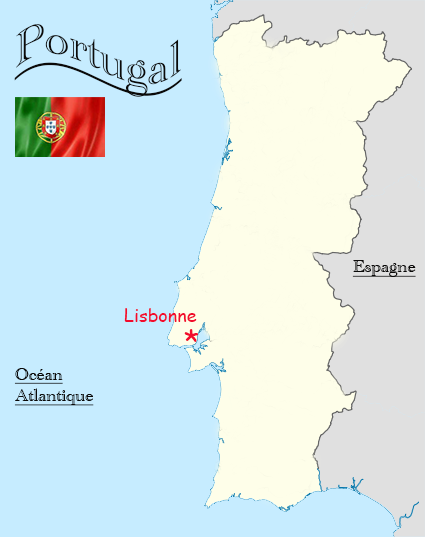
<style>
.page{position:relative;width:425px;height:537px;background:#c6ecff}
.page>*{position:absolute;margin:0}
.t1{font:48px "AcademyEngravedLetPlain";color:#0a0908;text-decoration:underline}
.t2{font:18px "AcademyEngravedLetPlain";color:#0a0908;text-decoration:underline}
.t3{font:18px "ComicSansMS";color:#f20c2d}
.t4{font:30px "ComicSansMS";color:#f20c2d}
</style>
<div class="page">
<p class="t1" style="left:14px;top:24px;width:168px;height:73px">Portugal</p>
<p class="t2" style="left:352px;top:260px;width:64px;height:17px">Espagne</p>
<p class="t3" style="left:124px;top:308px;width:73px;height:14px">Lisbonne</p>
<p class="t4" style="left:184px;top:329px;width:15px;height:13px">*</p>
<p class="t2" style="left:14px;top:368px;width:80px;height:38px">Océan<br>Atlantique</p>
</div>
